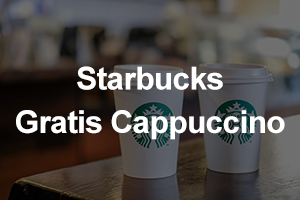
<style>
.page{position:relative;width:300px;height:200px}
.page>*{position:absolute;margin:0}
.t1{font:31.6px/43.5px "Arial-BoldMT";letter-spacing:-0.02em;color:#ffffff}
</style>
<div class="page">
<p class="t1" style="left:16px;top:66px;width:269px;height:74px;text-align:center">Starbucks<br>Gratis Cappuccino</p>
</div>
